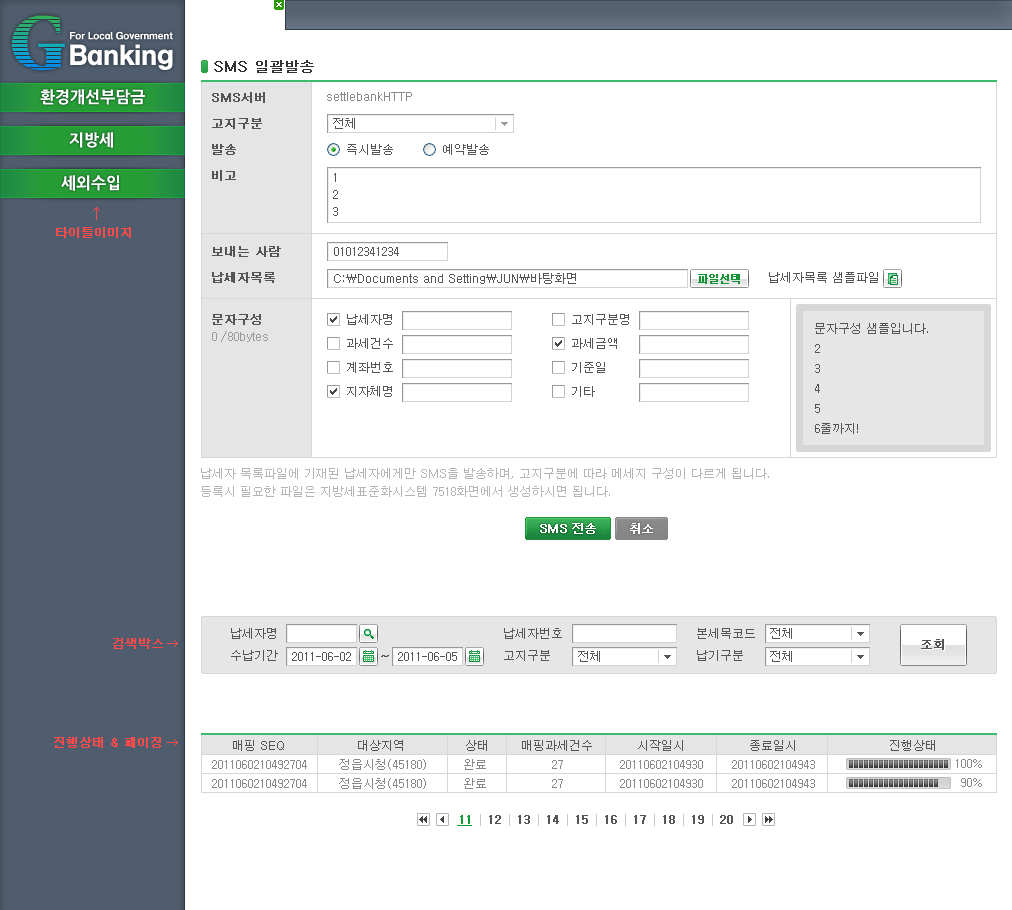
<style>
.page{position:relative;width:1012px;height:910px;background:#ffffff}
.page>*{position:absolute;margin:0}
.t1{font:14px "Dotum";color:#333333;font-weight:bold}
.t2{font:16px "NanumGothicOTFExtraBold";color:#ffffff}
.t3{font:12px/26px "Dotum";color:#555555;text-transform:uppercase;font-weight:bold}
.t4{font:12px "Dotum";color:#888888}
.t5{font:12px "Dotum";color:#555555;text-transform:uppercase}
.t6{font:12px/17px "Dotum";color:#555555}
.t7{font:12px "Dotum";color:#555555}
.t8{font:11px "Dotum";letter-spacing:-0.1em;color:#159436;font-weight:bold}
.t9{font:12px "Dotum";color:#555555;text-transform:uppercase;font-weight:bold}
.t10{font:12px/24px "Dotum";color:#555555;text-transform:uppercase}
.t11{font:12px/20px "Dotum";color:#555555;text-transform:uppercase}
.t12{font:12px "Dotum";color:#999999}
.t13{font:12px/18px "Dotum";color:#b5b5b5}
.t14{font:12px "Dotum";letter-spacing:-0.05em;color:#ffffff;font-weight:bold}
.t15{font:12px/22px "Dotum";color:#555555;text-transform:uppercase}
.t16{font:12px "Dotum";letter-spacing:-0.1em;color:#555555;font-weight:bold}
.t17{font:12px/19px "Dotum";color:#888888;text-transform:uppercase}
.t18{font:12px "Dotum";color:#888888;text-transform:uppercase}
.t19{font:12px "Dotum";color:#0e9f33;font-weight:bold;text-decoration:underline}
.t20{font:12px "Dotum";color:#555555;font-weight:bold}
</style>
<div class="page">
<p class="t1" style="left:214px;top:60px;width:100px;height:13px">SMS 일괄발송</p>
<p class="t2" style="left:40px;top:89px;width:105px;height:16px">환경개선부담금</p>
<p class="t3" style="left:212px;top:92px;width:53px;height:89px">SMS서버<br>고지구분<br>발송<br>비고</p>
<p class="t4" style="left:327px;top:92px;width:85px;height:9px">settlebankHTTP</p>
<p class="t5" style="left:333px;top:118px;width:22px;height:11px">전체</p>
<p class="t2" style="left:69px;top:132px;width:44px;height:16px">지방세</p>
<p class="t5" style="left:347px;top:144px;width:46px;height:11px">즉시발송</p>
<p class="t5" style="left:443px;top:144px;width:46px;height:11px">예약발송</p>
<p class="t6" style="left:333px;top:173px;width:5px;height:43px">1<br>2<br>3</p>
<p class="t2" style="left:61px;top:175px;width:58px;height:16px">세외수입</p>
<p class="t3" style="left:212px;top:246px;width:69px;height:37px">보내는 사람<br>납세자목록</p>
<p class="t5" style="left:334px;top:247px;width:65px;height:9px">01012341234</p>
<p class="t7" style="left:334px;top:273px;width:242px;height:11px">C:\Documents and Setting\JUN\바탕화면</p>
<p class="t8" style="left:698px;top:274px;width:42px;height:10px">파일선택</p>
<p class="t5" style="left:769px;top:272px;width:109px;height:11px">납세자목록 샘플파일</p>
<p class="t9" style="left:212px;top:314px;width:49px;height:11px">문자구성</p>
<p class="t10" style="left:347px;top:314px;width:46px;height:83px">납세자명<br>과세건수<br>계좌번호<br>지자체명</p>
<p class="t10" style="left:572px;top:314px;width:57px;height:83px">고지구분명<br>과세금액<br>기준일<br>기타</p>
<p class="t11" style="left:815px;top:323px;width:113px;height:111px">문자구성 샘플입니다.<br>2<br>3<br>4<br>5<br>6줄까지!</p>
<p class="t12" style="left:212px;top:331px;width:56px;height:11px">0 /80bytes</p>
<p class="t13" style="left:201px;top:468px;width:568px;height:29px">납세자 목록파일에 기재된 납세자에게만 SMS을 발송하며, 고지구분에 따라 메세지 구성이 다르게 됩니다.<br>등록시 필요한 파일은 지방세표준화시스템 7518화면에서 생성하시면 됩니다.</p>
<p class="t14" style="left:540px;top:523px;width:56px;height:11px">SMS 전송</p>
<p class="t14" style="left:630px;top:523px;width:23px;height:11px">취소</p>
<p class="t15" style="left:231px;top:628px;width:47px;height:33px">납세자명<br>수납기간</p>
<p class="t15" style="left:504px;top:628px;width:58px;height:33px">납세자번호<br>고지구분</p>
<p class="t15" style="left:697px;top:628px;width:58px;height:33px">본세목코드<br>납기구분</p>
<p class="t5" style="left:770px;top:628px;width:22px;height:11px">전체</p>
<p class="t16" style="left:921px;top:639px;width:23px;height:11px">조회</p>
<p class="t5" style="left:292px;top:652px;width:59px;height:9px">2011-06-02</p>
<p class="t5" style="left:398px;top:652px;width:59px;height:9px">2011-06-05</p>
<p class="t5" style="left:578px;top:651px;width:22px;height:11px">전체</p>
<p class="t5" style="left:770px;top:651px;width:22px;height:11px">전체</p>
<p class="t9" style="left:381px;top:655px;width:8px;height:2px">~</p>
<p class="t5" style="left:233px;top:740px;width:702px;height:11px">매핑 SEQ                  대상지역               상태        매핑과세건수           시작일시                종료일시                       진행상태</p>
<p class="t17" style="left:212px;top:759px;width:603px;height:30px">2011060210492704        정읍시청(45180)         완료                27              20110602104930       20110602104943<br>2011060210492704        정읍시청(45180)         완료                27              20110602104930       20110602104943</p>
<p class="t18" style="left:956px;top:759px;width:26px;height:9px">100%</p>
<p class="t18" style="left:961px;top:778px;width:21px;height:9px">90%</p>
<p class="t19" style="left:457px;top:815px;width:15px;height:11px">11</p>
<p class="t20" style="left:489px;top:815px;width:12px;height:9px">12</p>
<p class="t20" style="left:518px;top:815px;width:12px;height:9px">13</p>
<p class="t20" style="left:547px;top:815px;width:12px;height:9px">14</p>
<p class="t20" style="left:576px;top:815px;width:12px;height:9px">15</p>
<p class="t20" style="left:605px;top:815px;width:12px;height:9px">16</p>
<p class="t20" style="left:634px;top:815px;width:12px;height:9px">17</p>
<p class="t20" style="left:663px;top:815px;width:12px;height:9px">18</p>
<p class="t20" style="left:692px;top:815px;width:12px;height:9px">19</p>
<p class="t20" style="left:720px;top:815px;width:13px;height:9px">20</p>
</div>
